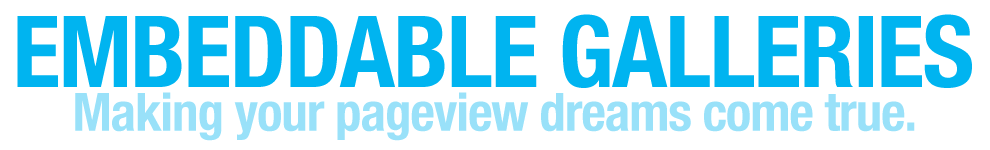
<style>
.page{position:relative;width:990px;height:150px;background:#ffffff}
.page>*{position:absolute;margin:0}
.t1{font:99.6px "HelveticaNeue-CondensedBold";letter-spacing:-0.02em;color:#00b4f0;text-transform:uppercase}
.t2{font:53px "HelveticaNeue-CondensedBold";letter-spacing:-0.02em;color:#99e1f9}
</style>
<div class="page">
<p class="t1" style="left:17px;top:14px;width:955px;height:74px">EMBEDDABLE GALLERIES</p>
<p class="t2" style="left:75px;top:92px;width:840px;height:49px">Making your pageview dreams come true.</p>
</div>
